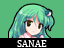
<style>
.page{position:relative;width:64px;height:48px;background:#57ba7b}
.page>*{position:absolute;margin:0}
.t1{font:10px "Cambria";color:#ffffff}
</style>
<div class="page">
<p class="t1" style="left:17px;top:40px;width:30px;height:7px">SANAE</p>
</div>
